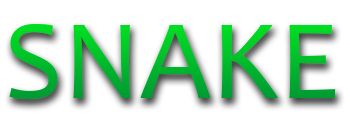
<style>
.page{position:relative;width:350px;height:130px;background:#ffffff}
.page>*{position:absolute;margin:0}
.t1{font:115px "Candara"}
</style>
<div class="page">
<p class="t1" style="left:9px;top:24px;width:327px;height:75px">SNAKE</p>
</div>
